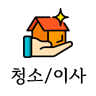
<style>
.page{position:relative;width:96px;height:96px;background:#ffffff}
.page>*{position:absolute;margin:0}
.t1{font:18px "GowunBatang-Regular";color:#000000;font-weight:bold}
</style>
<div class="page">
<p class="t1" style="left:11px;top:67px;width:75px;height:18px">청소/이사</p>
</div>
